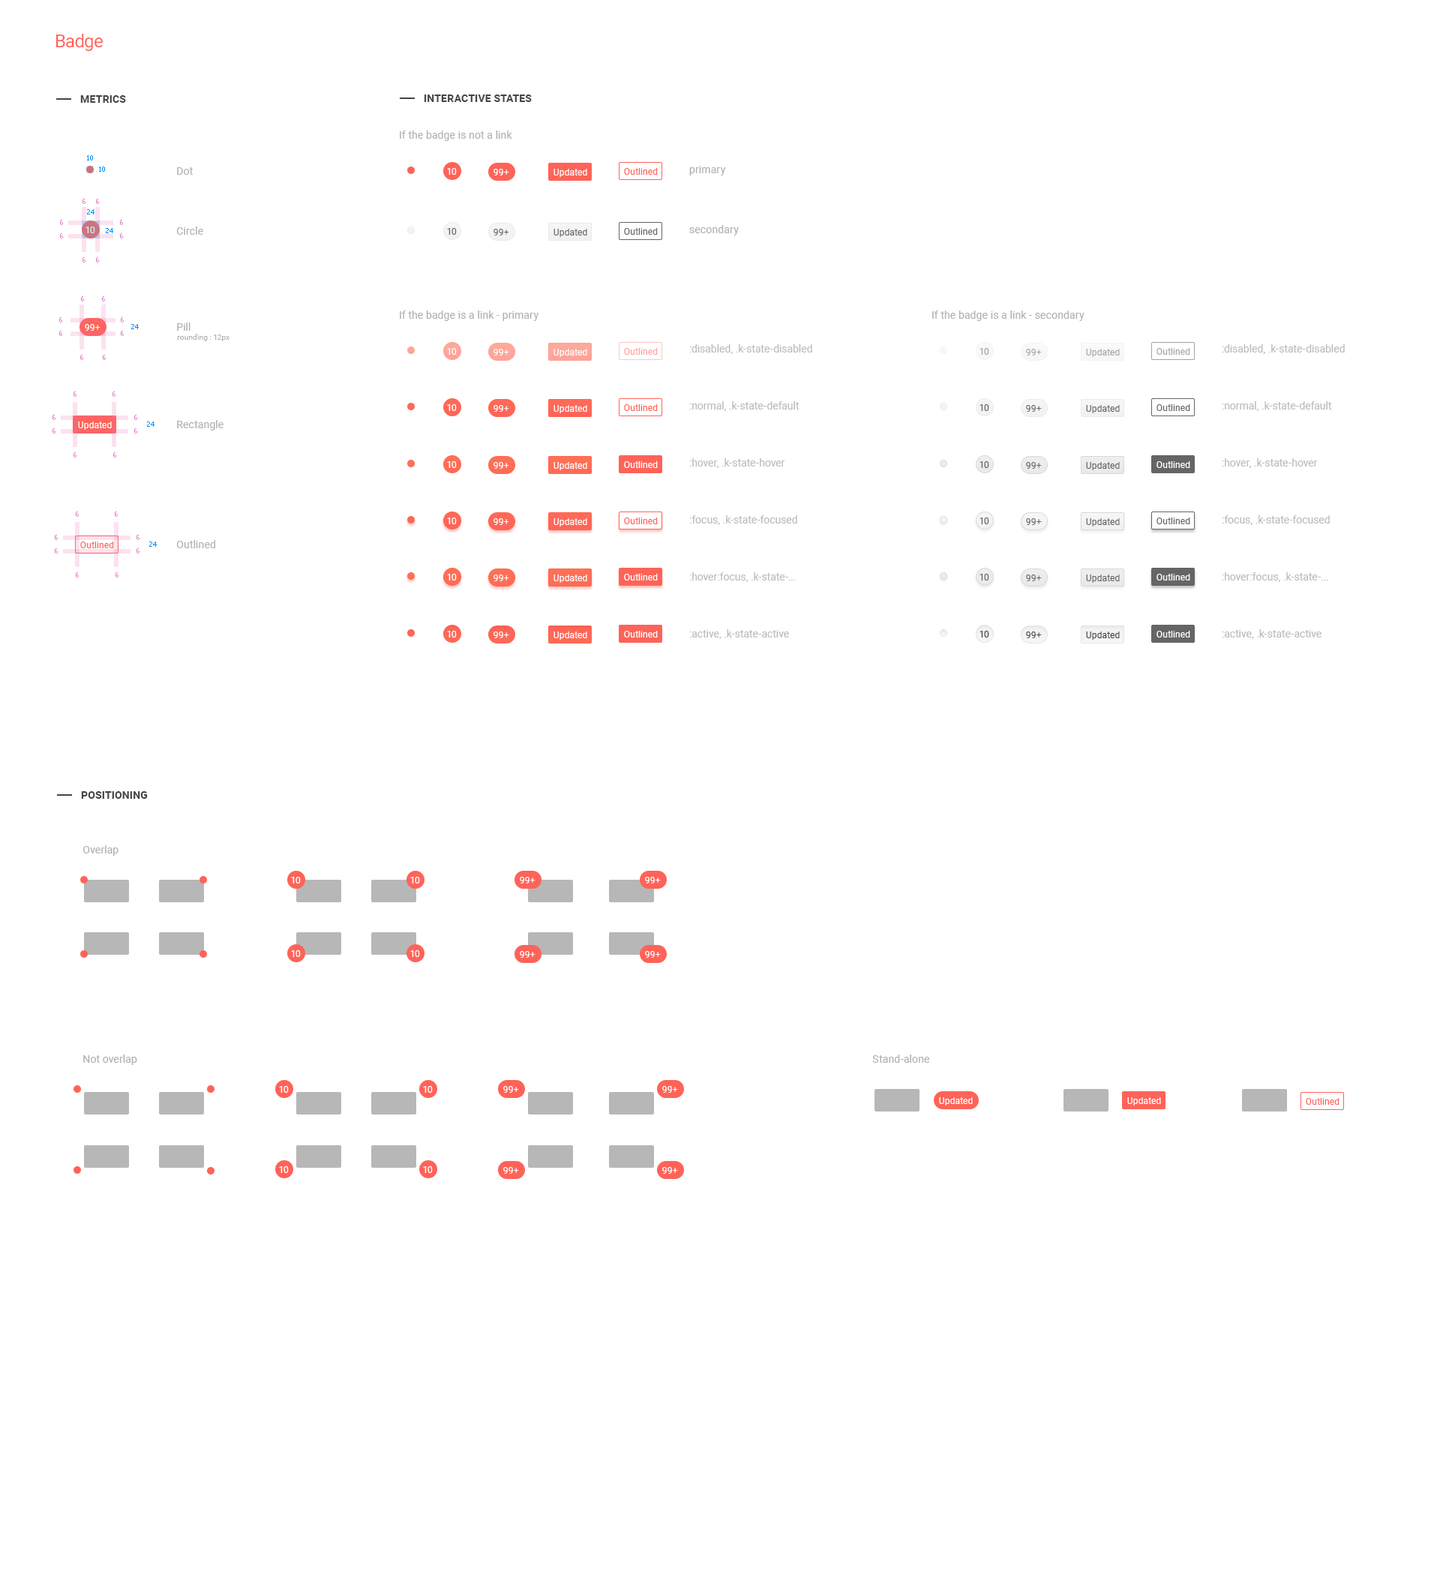
<style>
.page{position:relative;width:1440px;height:1578px;background:#ffffff}
.page>*{position:absolute;margin:0}
.t1{font:18px "Roboto-Regular";letter-spacing:-0.025em;color:#ff6358}
.t2{font:10.5px "Roboto-Bold";letter-spacing:0.01em;color:#454545;text-transform:uppercase}
.t3{font:10.5px "Roboto-Regular";letter-spacing:0.01em;color:#b1b1b1}
.t4{font:6.8px "Tahoma";color:#008aff}
.t5{font:9px "Roboto-Regular";letter-spacing:0.01em;color:#ffffff}
.t6{font:9px "Roboto-Regular";letter-spacing:0.01em;color:#ff6358}
.t7{font:6.8px "Tahoma";color:#e87ecb}
.t8{font:9px "Roboto-Regular";letter-spacing:0.01em;color:#cceffc}
.t9{font:9px "Roboto-Regular";letter-spacing:0.01em;color:#656565}
.t10{font:7.5px "Roboto-Regular";letter-spacing:0.01em;color:#b1b1b1}
.t11{font:9px "Roboto-Regular";letter-spacing:0.01em;color:#ffa19b}
.t12{font:10.5px/57px "Roboto-Regular";color:#bcbcbc}
.t13{font:9px "Roboto-Regular";letter-spacing:0.01em;color:#a3a3a3}
.t14{font:9px "Roboto-Regular";letter-spacing:0.01em;color:#fffefe}
.t15{font:9px "Roboto-Regular";letter-spacing:0.01em;color:#454545}
</style>
<div class="page">
<p class="t1" style="left:56px;top:34px;width:47px;height:17px">Badge</p>
<p class="t2" style="left:80px;top:95px;width:46px;height:8px">metrics</p>
<p class="t2" style="left:424px;top:94px;width:108px;height:8px">interactive states</p>
<p class="t3" style="left:400px;top:130px;width:112px;height:11px">If the badge is not a link</p>
<p class="t4" style="left:87px;top:155px;width:6px;height:5px">10</p>
<p class="t4" style="left:99px;top:166px;width:6px;height:6px">10</p>
<p class="t3" style="left:177px;top:167px;width:16px;height:8px">Dot</p>
<p class="t5" style="left:447px;top:168px;width:10px;height:7px">10</p>
<p class="t5" style="left:494px;top:169px;width:15px;height:7px">99+</p>
<p class="t5" style="left:554px;top:169px;width:33px;height:8px">Updated</p>
<p class="t6" style="left:624px;top:168px;width:34px;height:7px">Outlined</p>
<p class="t3" style="left:689px;top:166px;width:37px;height:10px">primary</p>
<p class="t7" style="left:82px;top:199px;width:4px;height:5px">6</p>
<p class="t4" style="left:87px;top:209px;width:7px;height:5px">24</p>
<p class="t7" style="left:96px;top:199px;width:3px;height:5px">6</p>
<p class="t7" style="left:60px;top:220px;width:3px;height:5px">6</p>
<p class="t7" style="left:120px;top:220px;width:3px;height:5px">6</p>
<p class="t7" style="left:60px;top:233px;width:3px;height:5px">6</p>
<p class="t8" style="left:86px;top:226px;width:9px;height:7px">10</p>
<p class="t4" style="left:106px;top:228px;width:7px;height:5px">24</p>
<p class="t7" style="left:120px;top:233px;width:3px;height:5px">6</p>
<p class="t3" style="left:176px;top:226px;width:27px;height:9px">Circle</p>
<p class="t9" style="left:447px;top:228px;width:10px;height:7px">10</p>
<p class="t9" style="left:494px;top:229px;width:15px;height:7px">99+</p>
<p class="t9" style="left:554px;top:229px;width:33px;height:8px">Updated</p>
<p class="t9" style="left:624px;top:228px;width:34px;height:7px">Outlined</p>
<p class="t3" style="left:689px;top:225px;width:50px;height:11px">secondary</p>
<p class="t7" style="left:82px;top:257px;width:4px;height:5px">6</p>
<p class="t7" style="left:96px;top:257px;width:3px;height:5px">6</p>
<p class="t7" style="left:81px;top:296px;width:3px;height:6px">6</p>
<p class="t7" style="left:102px;top:296px;width:3px;height:6px">6</p>
<p class="t7" style="left:59px;top:317px;width:3px;height:5px">6</p>
<p class="t7" style="left:121px;top:317px;width:3px;height:5px">6</p>
<p class="t3" style="left:400px;top:310px;width:139px;height:11px">If the badge is a link - primary</p>
<p class="t3" style="left:932px;top:310px;width:152px;height:11px">If the badge is a link - secondary</p>
<p class="t5" style="left:85px;top:324px;width:15px;height:7px">99+</p>
<p class="t4" style="left:131px;top:324px;width:8px;height:5px">24</p>
<p class="t3" style="left:177px;top:322px;width:13px;height:9px">Pill</p>
<p class="t7" style="left:59px;top:331px;width:3px;height:5px">6</p>
<p class="t7" style="left:121px;top:331px;width:3px;height:5px">6</p>
<p class="t10" style="left:177px;top:334px;width:53px;height:7px">rounding : 12px</p>
<p class="t5" style="left:447px;top:348px;width:10px;height:7px">10</p>
<p class="t5" style="left:494px;top:349px;width:15px;height:7px">99+</p>
<p class="t5" style="left:554px;top:349px;width:33px;height:8px">Updated</p>
<p class="t11" style="left:624px;top:348px;width:34px;height:7px">Outlined</p>
<p class="t12" style="left:689px;top:344px;width:123px;height:295px">:disabled, .k-state-disabled<br>:normal, .k-state-default<br>:hover, .k-state-hover<br>:focus, .k-state-focused<br>:hover:focus, .k-state-...<br>:active, .k-state-active</p>
<p class="t13" style="left:980px;top:348px;width:9px;height:7px">10</p>
<p class="t13" style="left:1026px;top:349px;width:16px;height:7px">99+</p>
<p class="t13" style="left:1086px;top:349px;width:34px;height:8px">Updated</p>
<p class="t13" style="left:1156px;top:348px;width:34px;height:7px">Outlined</p>
<p class="t12" style="left:1222px;top:344px;width:123px;height:295px">:disabled, .k-state-disabled<br>:normal, .k-state-default<br>:hover, .k-state-hover<br>:focus, .k-state-focused<br>:hover:focus, .k-state-...<br>:active, .k-state-active</p>
<p class="t7" style="left:80px;top:355px;width:3px;height:5px">6</p>
<p class="t7" style="left:103px;top:355px;width:3px;height:5px">6</p>
<p class="t7" style="left:74px;top:392px;width:2px;height:5px">6</p>
<p class="t7" style="left:112px;top:392px;width:4px;height:5px">6</p>
<p class="t5" style="left:447px;top:404px;width:10px;height:7px">10</p>
<p class="t5" style="left:494px;top:405px;width:15px;height:7px">99+</p>
<p class="t5" style="left:554px;top:405px;width:33px;height:8px">Updated</p>
<p class="t6" style="left:624px;top:404px;width:34px;height:7px">Outlined</p>
<p class="t9" style="left:980px;top:404px;width:9px;height:7px">10</p>
<p class="t9" style="left:1026px;top:405px;width:16px;height:7px">99+</p>
<p class="t9" style="left:1086px;top:405px;width:34px;height:8px">Updated</p>
<p class="t9" style="left:1156px;top:404px;width:34px;height:7px">Outlined</p>
<p class="t7" style="left:52px;top:415px;width:4px;height:5px">6</p>
<p class="t5" style="left:78px;top:422px;width:34px;height:8px">Updated</p>
<p class="t7" style="left:134px;top:415px;width:3px;height:5px">6</p>
<p class="t4" style="left:147px;top:422px;width:7px;height:5px">24</p>
<p class="t3" style="left:177px;top:420px;width:47px;height:10px">Rectangle</p>
<p class="t7" style="left:52px;top:428px;width:4px;height:6px">6</p>
<p class="t7" style="left:134px;top:428px;width:3px;height:6px">6</p>
<p class="t7" style="left:74px;top:452px;width:2px;height:6px">6</p>
<p class="t7" style="left:113px;top:452px;width:3px;height:6px">6</p>
<p class="t5" style="left:447px;top:461px;width:10px;height:7px">10</p>
<p class="t5" style="left:494px;top:462px;width:15px;height:7px">99+</p>
<p class="t5" style="left:554px;top:462px;width:33px;height:8px">Updated</p>
<p class="t5" style="left:624px;top:461px;width:34px;height:7px">Outlined</p>
<p class="t9" style="left:980px;top:461px;width:9px;height:7px">10</p>
<p class="t9" style="left:1026px;top:462px;width:16px;height:7px">99+</p>
<p class="t9" style="left:1086px;top:462px;width:34px;height:8px">Updated</p>
<p class="t5" style="left:1156px;top:461px;width:34px;height:7px">Outlined</p>
<p class="t7" style="left:76px;top:512px;width:3px;height:5px">6</p>
<p class="t7" style="left:115px;top:512px;width:3px;height:5px">6</p>
<p class="t5" style="left:447px;top:518px;width:10px;height:6px">10</p>
<p class="t5" style="left:494px;top:518px;width:15px;height:7px">99+</p>
<p class="t5" style="left:554px;top:518px;width:33px;height:8px">Updated</p>
<p class="t6" style="left:624px;top:518px;width:34px;height:6px">Outlined</p>
<p class="t9" style="left:980px;top:518px;width:9px;height:6px">10</p>
<p class="t9" style="left:1026px;top:518px;width:16px;height:7px">99+</p>
<p class="t9" style="left:1086px;top:518px;width:34px;height:8px">Updated</p>
<p class="t9" style="left:1156px;top:518px;width:34px;height:6px">Outlined</p>
<p class="t7" style="left:55px;top:535px;width:3px;height:5px">6</p>
<p class="t6" style="left:80px;top:542px;width:34px;height:6px">Outlined</p>
<p class="t7" style="left:136px;top:535px;width:4px;height:5px">6</p>
<p class="t4" style="left:149px;top:542px;width:8px;height:5px">24</p>
<p class="t3" style="left:176px;top:540px;width:39px;height:8px">Outlined</p>
<p class="t7" style="left:55px;top:548px;width:3px;height:6px">6</p>
<p class="t7" style="left:136px;top:548px;width:4px;height:6px">6</p>
<p class="t7" style="left:76px;top:572px;width:3px;height:6px">6</p>
<p class="t7" style="left:116px;top:572px;width:2px;height:6px">6</p>
<p class="t5" style="left:447px;top:574px;width:10px;height:6px">10</p>
<p class="t5" style="left:494px;top:574px;width:15px;height:7px">99+</p>
<p class="t5" style="left:554px;top:574px;width:33px;height:9px">Updated</p>
<p class="t5" style="left:624px;top:574px;width:34px;height:6px">Outlined</p>
<p class="t9" style="left:980px;top:574px;width:9px;height:6px">10</p>
<p class="t9" style="left:1026px;top:574px;width:16px;height:7px">99+</p>
<p class="t9" style="left:1086px;top:574px;width:34px;height:9px">Updated</p>
<p class="t5" style="left:1156px;top:574px;width:34px;height:6px">Outlined</p>
<p class="t5" style="left:447px;top:631px;width:10px;height:7px">10</p>
<p class="t5" style="left:494px;top:632px;width:15px;height:6px">99+</p>
<p class="t5" style="left:554px;top:632px;width:33px;height:8px">Updated</p>
<p class="t14" style="left:624px;top:631px;width:34px;height:7px">Outlined</p>
<p class="t15" style="left:980px;top:631px;width:9px;height:7px">10</p>
<p class="t15" style="left:1026px;top:632px;width:16px;height:6px">99+</p>
<p class="t15" style="left:1086px;top:632px;width:34px;height:8px">Updated</p>
<p class="t14" style="left:1156px;top:631px;width:34px;height:7px">Outlined</p>
<p class="t2" style="left:81px;top:791px;width:67px;height:8px">positioning</p>
<p class="t3" style="left:82px;top:845px;width:36px;height:11px">Overlap</p>
<p class="t5" style="left:291px;top:877px;width:10px;height:7px">10</p>
<p class="t5" style="left:410px;top:877px;width:10px;height:7px">10</p>
<p class="t5" style="left:520px;top:877px;width:16px;height:7px">99+</p>
<p class="t5" style="left:645px;top:877px;width:16px;height:7px">99+</p>
<p class="t5" style="left:291px;top:950px;width:10px;height:7px">10</p>
<p class="t5" style="left:410px;top:950px;width:10px;height:7px">10</p>
<p class="t5" style="left:520px;top:951px;width:16px;height:7px">99+</p>
<p class="t5" style="left:645px;top:951px;width:16px;height:7px">99+</p>
<p class="t3" style="left:83px;top:1054px;width:54px;height:11px">Not overlap</p>
<p class="t3" style="left:872px;top:1054px;width:57px;height:9px">Stand-alone</p>
<p class="t5" style="left:279px;top:1086px;width:10px;height:7px">10</p>
<p class="t5" style="left:423px;top:1086px;width:10px;height:7px">10</p>
<p class="t5" style="left:503px;top:1086px;width:16px;height:7px">99+</p>
<p class="t5" style="left:662px;top:1086px;width:16px;height:7px">99+</p>
<p class="t5" style="left:939px;top:1097px;width:34px;height:9px">Updated</p>
<p class="t5" style="left:1127px;top:1097px;width:34px;height:9px">Updated</p>
<p class="t6" style="left:1306px;top:1098px;width:34px;height:7px">Outlined</p>
<p class="t5" style="left:279px;top:1166px;width:10px;height:7px">10</p>
<p class="t5" style="left:423px;top:1166px;width:10px;height:7px">10</p>
<p class="t5" style="left:503px;top:1167px;width:16px;height:7px">99+</p>
<p class="t5" style="left:662px;top:1167px;width:16px;height:7px">99+</p>
</div>
